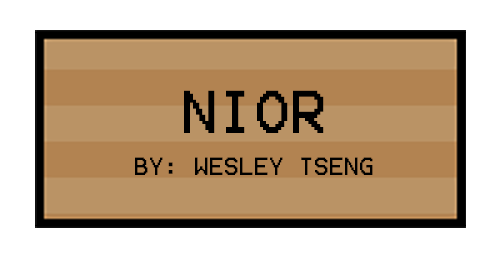
<style>
.page{position:relative;width:500px;height:258px;background:#ffffff}
.page>*{position:absolute;margin:0}
.t1{font:20px "Terminal";color:#000000}
.t2{font:48.4px "Terminal";color:#000000}
</style>
<div class="page">
<p class="t1" style="left:135px;top:90px;width:238px;height:85px;text-align:center"><span class="t2">NIOR<br><br></span>BY: WESLEY TSENG</p>
</div>
